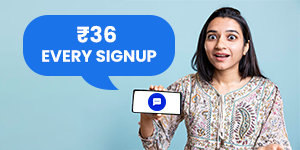
<style>
.page{position:relative;width:300px;height:150px}
.page>*{position:absolute;margin:0}
.t1{font:16.2px "Poppins-Bold";color:#ffffff;text-transform:uppercase}
.t2{font:21.9px "Poppins-Bold";color:#ffffff;text-transform:uppercase}
</style>
<div class="page">
<p class="t1" style="left:42px;top:25px;width:115px;height:37px;text-align:center"><span class="t2">₹36 <br></span>Every Signup</p>
</div>
